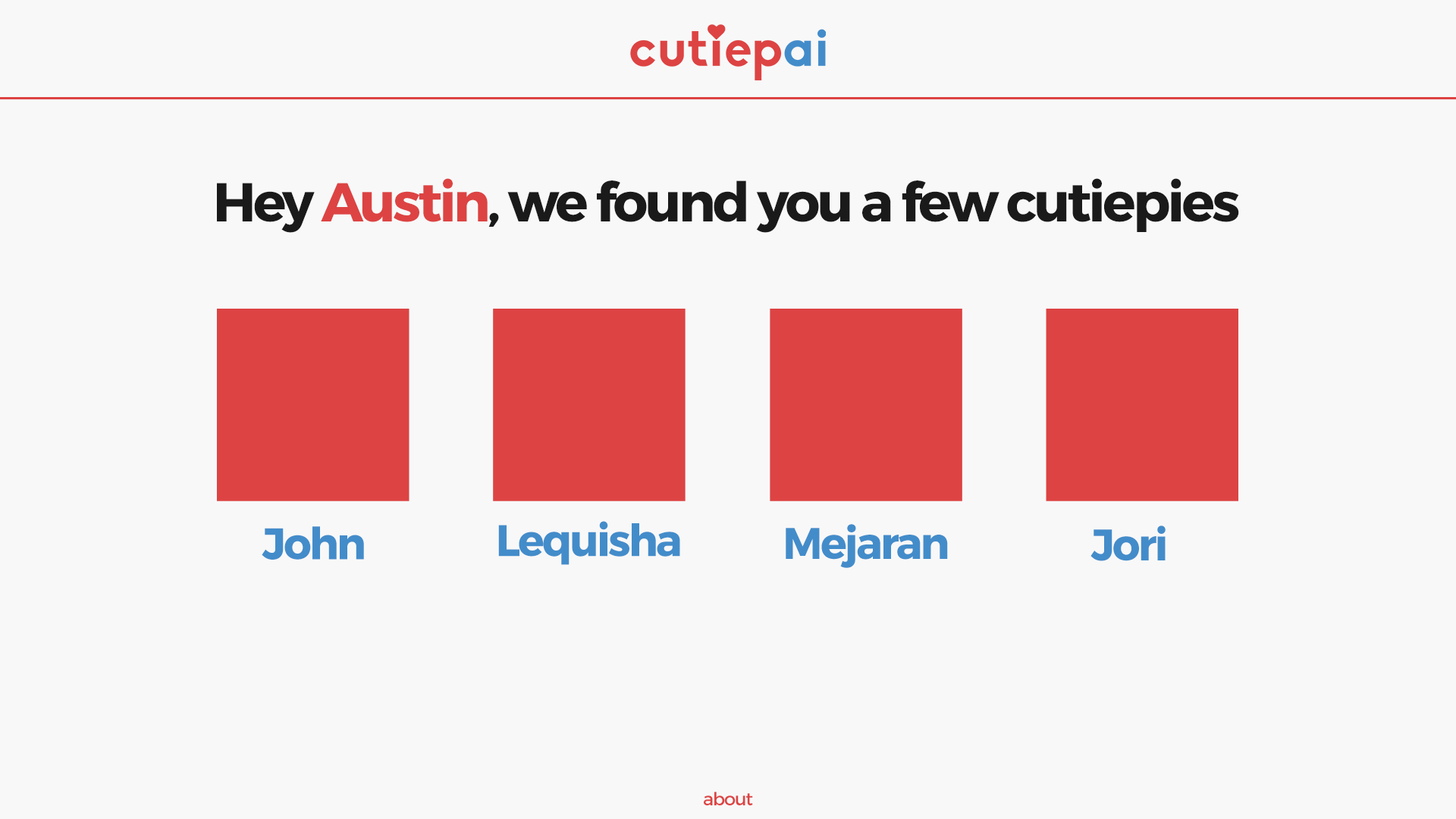
<style>
.page{position:relative;width:1456px;height:819px;background:#f8f8f8}
.page>*{position:absolute;margin:0}
.t1{font:54.6px "Montserrat-Bold";letter-spacing:-0.05em;color:#1a1a1a}
.t2{font:54.6px "Montserrat-Bold";letter-spacing:-0.05em;color:#dd4343}
.t3{font:44.2px "Montserrat-Bold";letter-spacing:-0.05em;color:#438cca}
.t4{font:18.2px "Montserrat-Regular";letter-spacing:-0.05em;color:#dd4343}
</style>
<div class="page">
<p class="t1" style="left:217px;top:178px;width:1022px;height:55px">Hey <span class="t2">Austin</span>, we found you a few cutiepies</p>
<p class="t3" style="left:498px;top:521px;width:182px;height:44px">Lequisha</p>
<p class="t3" style="left:262px;top:526px;width:102px;height:34px">John</p>
<p class="t3" style="left:786px;top:524px;width:162px;height:44px">Mejaran</p>
<p class="t3" style="left:1090px;top:526px;width:76px;height:35px">Jori</p>
<p class="t4" style="left:704px;top:792px;width:49px;height:13px">about</p>
</div>
